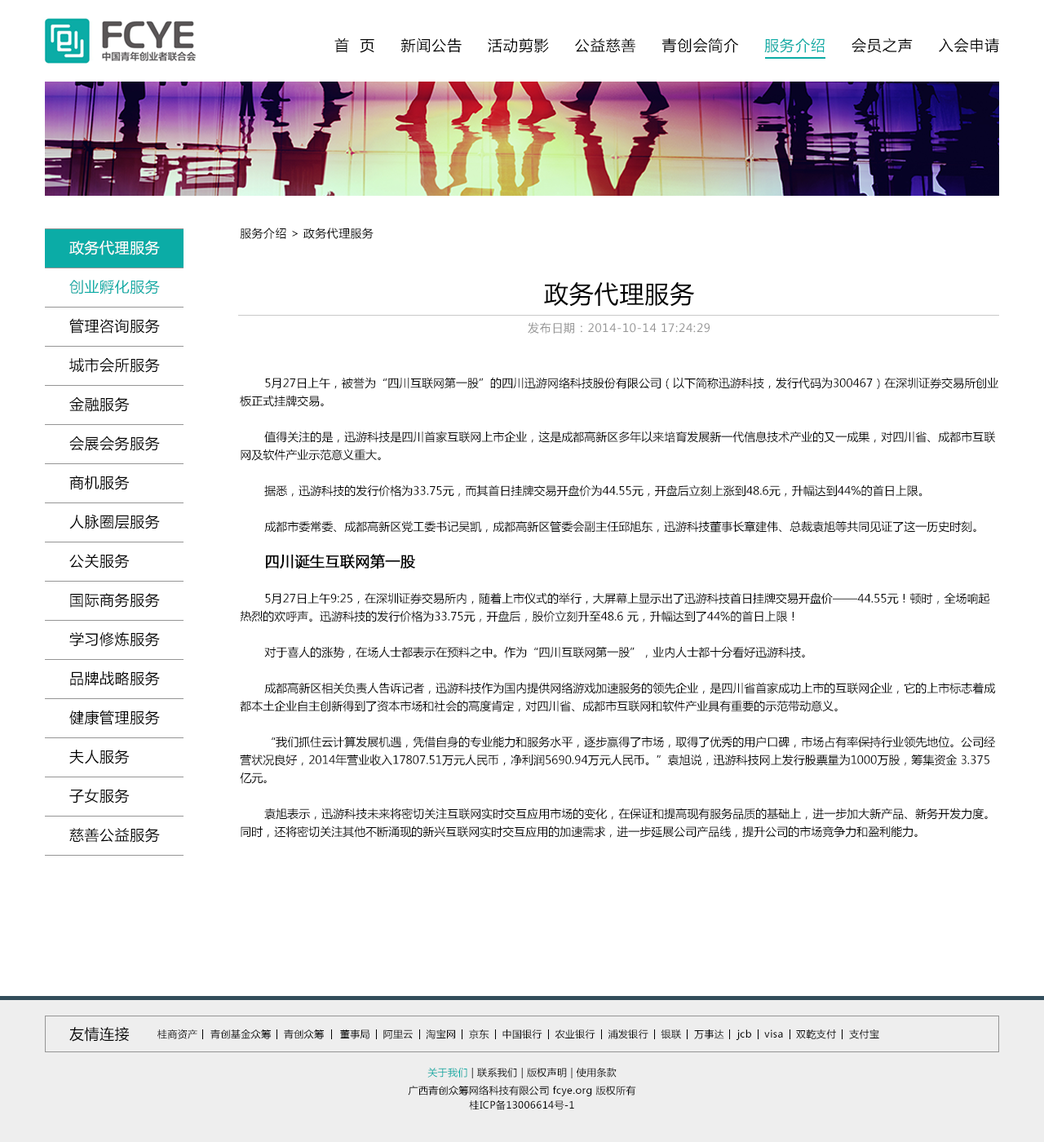
<style>
.page{position:relative;width:1044px;height:1142px;background:#ffffff}
.page>*{position:absolute;margin:0}
.t1{font:14.7px "MicrosoftYaHei";letter-spacing:0.05em;color:#000000}
.t2{font:14.7px "MicrosoftYaHei";letter-spacing:0.05em;color:#0baca6}
.t3{font:11.4px "MicrosoftYaHei";letter-spacing:0.03em;color:#000000}
.t4{font:14.7px/39.2px "MicrosoftYaHei";letter-spacing:0.03em;color:#000000}
.t5{font:14.7px/39.2px "MicrosoftYaHei";letter-spacing:0.03em;color:#ffffff}
.t6{font:14.7px/39.2px "MicrosoftYaHei";letter-spacing:0.03em;color:#0baca6}
.t7{font:24.5px "MicrosoftYaHei";letter-spacing:0.03em;color:#000000}
.t8{font:11.4px "MicrosoftYaHei";letter-spacing:0.05em;color:#969696}
.t9{font:11.4px/17.9px "MicrosoftYaHei";color:#000000}
.t10{font:14.7px/17.9px "MicrosoftYaHei";color:#000000;font-weight:bold}
.t11{font:14.7px "MicrosoftYaHei";letter-spacing:0.03em;color:#000000}
.t12{font:9.8px "MicrosoftYaHei";letter-spacing:0.03em;color:#000000}
.t13{font:9.8px "MicrosoftYaHei";letter-spacing:0.03em}
.t14{font:9.8px/14.7px "MicrosoftYaHei";letter-spacing:0.03em;color:#000000}
</style>
<div class="page">
<p class="t1" style="left:334px;top:38px;width:665px;height:15px">首  页     新闻公告     活动剪影     公益慈善     青创会简介     <span class="t2">服务介绍</span>     会员之声     入会申请</p>
<p class="t3" style="left:240px;top:228px;width:134px;height:11px">服务介绍 &gt; 政务代理服务</p>
<p class="t4" style="left:69px;top:241px;width:91px;height:602px"><span class="t5">政务代理服务<br></span><span class="t6">创业孵化服务<br></span>管理咨询服务<br>城市会所服务<br>金融服务<br>会展会务服务<br>商机服务<br>人脉圈层服务<br>公关服务<br>国际商务服务<br>学习修炼服务<br>品牌战略服务<br>健康管理服务<br>夫人服务<br>子女服务<br>慈善公益服务</p>
<p class="t7" style="left:544px;top:281px;width:151px;height:26px">政务代理服务</p>
<p class="t8" style="left:528px;top:322px;width:182px;height:12px">发布日期：2014-10-14 17:24:29</p>
<p class="t9" style="left:240px;top:377px;width:758px;height:461px">5月27日上午，被誉为“四川互联网第一股”的四川迅游网络科技股份有限公司（以下简称迅游科技，发行代码为300467）在深圳证券交易所创业板正式挂牌交易。<br><br>值得关注的是，迅游科技是四川首家互联网上市企业，这是成都高新区多年以来培育发展新一代信息技术产业的又一成果，对四川省、成都市互联网及软件产业示范意义重大。<br><br>据悉，迅游科技的发行价格为33.75元，而其首日挂牌交易开盘价为44.55元，开盘后立刻上涨到48.6元，升幅达到44%的首日上限｡<br><br>成都市委常委、成都高新区党工委书记吴凯，成都高新区管委会副主任邱旭东，迅游科技董事长章建伟、总裁袁旭等共同见证了这一历史时刻。<br><br><span class="t10">四川诞生互联网第一股<br></span><br>5月27日上午9:25，在深圳证券交易所内，随着上市仪式的举行，大屏幕上显示出了迅游科技首日挂牌交易开盘价——44.55元！顿时，全场响起热烈的欢呼声。迅游科技的发行价格为33.75元，开盘后，股价立刻升至48.6 元，升幅达到了44%的首日上限！<br><br>对于喜人的涨势，在场人士都表示在预料之中。作为“四川互联网第一股”，业内人士都十分看好迅游科技。<br><br>成都高新区相关负责人告诉记者，迅游科技作为国内提供网络游戏加速服务的领先企业，是四川省首家成功上市的互联网企业，它的上市标志着成都本土企业自主创新得到了资本市场和社会的高度肯定，对四川省、成都市互联网和软件产业具有重要的示范带动意义。<br><br>“我们抓住云计算发展机遇，凭借自身的专业能力和服务水平，逐步赢得了市场，取得了优秀的用户口碑，市场占有率保持行业领先地位。公司经营状况良好，2014年营业收入17807.51万元人民币，净利润5690.94万元人民币。”袁旭说，迅游科技网上发行股票量为1000万股，筹集资金 3.375亿元。<br><br>袁旭表示，迅游科技未来将密切关注互联网实时交互应用市场的变化，在保证和提高现有服务品质的基础上，进一步加大新产品、新务开发力度。同时，还将密切关注其他不断涌现的新兴互联网实时交互应用的加速需求，进一步延展公司产品线，提升公司的市场竞争力和盈利能力。</p>
<p class="t11" style="left:69px;top:1026px;width:60px;height:16px">友情连接</p>
<p class="t12" style="left:157px;top:1029px;width:722px;height:11px">桂商资产    青创基金众筹    青创众筹     董事局    阿里云    淘宝网    京东    中国银行    农业银行    浦发银行    银联    万事达    jcb    visa    双乾支付    支付宝</p>
<p class="t13" style="left:427px;top:1068px;width:190px;height:10px">关于我们 | 联系我们 | 版权声明 | 使用条款</p>
<p class="t14" style="left:408px;top:1086px;width:228px;height:24px;text-align:center">广西青创众筹网络科技有限公司 fcye.org 版权所有<br>桂ICP备13006614号-1</p>
</div>
